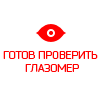
<style>
.page{position:relative;width:100px;height:100px;background:#ffffff}
.page>*{position:absolute;margin:0}
.t1{font:11px "Bender";color:#ff0000}
</style>
<div class="page">
<p class="t1" style="left:3px;top:51px;width:95px;height:21px;text-align:center">ГОТОВ ПРОВЕРИТЬ <br>ГЛАЗОМЕР</p>
</div>
